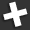
<style>
.page{position:relative;width:30px;height:30px;background:#333333}
.page>*{position:absolute;margin:0}
.t1{font:48px "CascadiaMonoRoman-Bold";color:#ffffff;font-style:italic}
</style>
<div class="page">
<p class="t1" style="left:3px;top:1px;width:25px;height:26px;rotate:-15deg">+</p>
</div>
